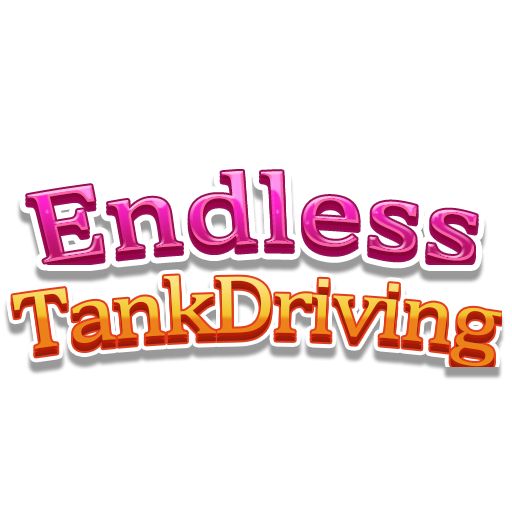
<style>
.page{position:relative;width:512px;height:512px;background:#ffffff}
.page>*{position:absolute;margin:0}
.t1{font:103.5px "Cambria"}
.t2{font:83.3px "Cambria";letter-spacing:-0.04em}
</style>
<div class="page">
<p class="t1" style="left:27px;top:171px;width:450px;height:92px">Endless</p>
<p class="t2" style="left:12px;top:275px;width:490px;height:92px">TankDriving</p>
</div>
